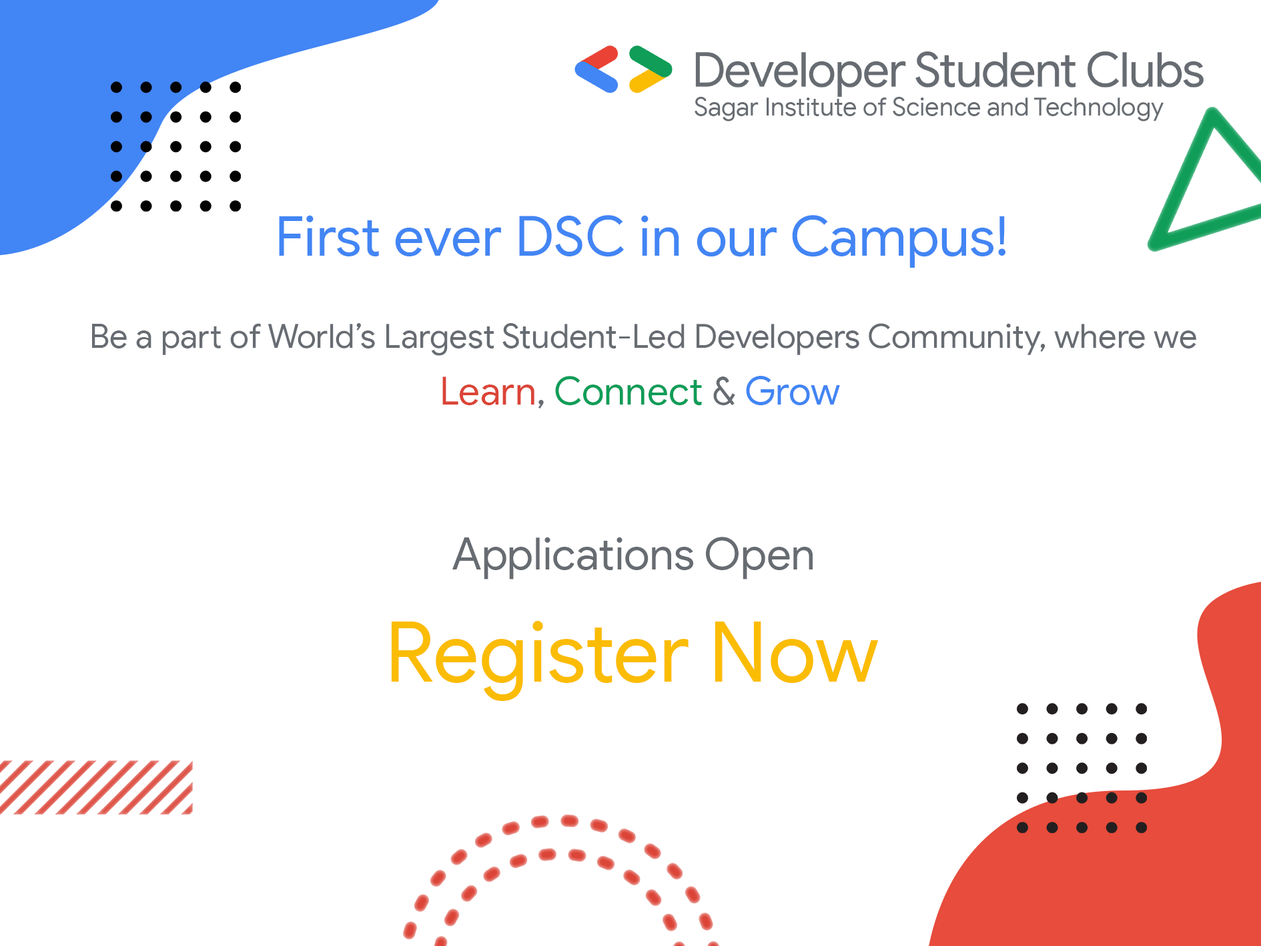
<style>
.page{position:relative;width:1261px;height:946px;background:#ffffff}
.page>*{position:absolute;margin:0}
.t1{font:25px "GoogleSans-Regular";color:#676c72}
.t2{font:55.6px "GoogleSansDisplay-Regular";color:#4285f4}
.t3{font:33.4px "GoogleSansDisplay-Regular";color:#676c72}
.t4{font:38.9px "GoogleSansDisplay-Regular";color:#0f9d58}
.t5{font:38.9px "GoogleSansDisplay-Regular";color:#db4437}
.t6{font:38.9px "GoogleSansDisplay-Regular";color:#676c72}
.t7{font:38.9px "GoogleSansDisplay-Regular";color:#4285f4}
.t8{font:44.5px "GoogleSansDisplay-Regular";color:#676c72}
.t9{font:83.4px "GoogleSansDisplay-Regular";color:#fbbc04}
</style>
<div class="page">
<p class="t1" style="left:695px;top:97px;width:469px;height:24px">Sagar Institute of Science and Technology</p>
<p class="t2" style="left:279px;top:215px;width:727px;height:53px">First ever DSC in our Campus!</p>
<p class="t3" style="left:92px;top:323px;width:1104px;height:33px">Be a part of World’s Largest Student-Led Developers Community, where we</p>
<p class="t4" style="left:442px;top:376px;width:398px;height:32px"><span class="t5">Learn</span><span class="t6">, </span>Connect <span class="t6">&amp; </span><span class="t7">Grow</span></p>
<p class="t8" style="left:452px;top:536px;width:361px;height:43px">Applications Open</p>
<p class="t9" style="left:391px;top:621px;width:488px;height:80px">Register Now</p>
</div>
